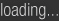
<style>
.page{position:relative;width:59px;height:21px}
.page>*{position:absolute;margin:0}
.t1{font:18px "HelveticaNeueLTStd-LtCn";color:#d1d2d4}
</style>
<div class="page">
<p class="t1" style="left:1px;top:3px;width:57px;height:17px">loading...</p>
</div>
